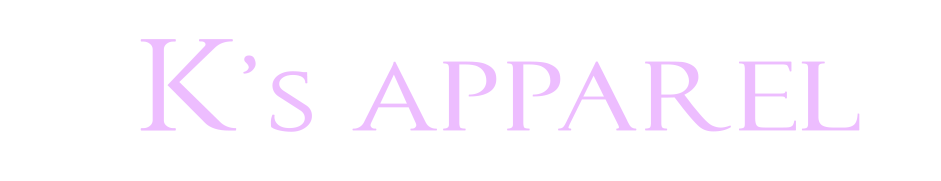
<style>
.page{position:relative;width:941px;height:181px;background:#ffffff}
.page>*{position:absolute;margin:0}
.t1{font:95.4px "FelixTitlingMT";letter-spacing:0.005em;color:#edbdff;font-weight:bold;scale:1.2 1}
.t2{font:128.9px "Cinzel-Regular";letter-spacing:0.005em;color:#edbdff;font-weight:bold;scale:1.2 1}
.t3{font:95.4px "Cinzel-Regular";letter-spacing:0.005em;color:#edbdff;font-weight:bold;scale:1.2 1}
</style>
<div class="page">
<p class="t1" style="left:140px;top:39px;width:720px;height:93px"><span class="t2">K</span><span class="t3">’s A</span>pparel</p>
</div>
